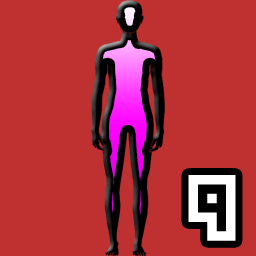
<style>
.page{position:relative;width:256px;height:256px;background:#bf3030}
.page>*{position:absolute;margin:0}
.t1{font:75px "KenPixel-Blocks";color:#ffffff}
</style>
<div class="page">
<p class="t1" style="left:188px;top:175px;width:48px;height:66px">9</p>
</div>
